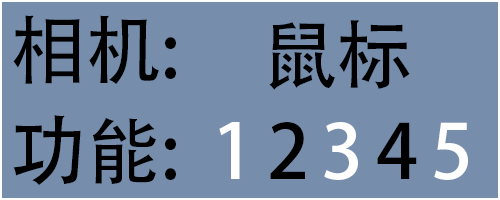
<style>
.page{position:relative;width:500px;height:200px;background:#768dac}
.page>*{position:absolute;margin:0}
.t1{font:75px "AdobeHeitiStd-Regular";color:#000000}
.t2{font:75px "AdobeHeitiStd-Regular";color:#ffffff}
</style>
<div class="page">
<p class="t1" style="left:13px;top:15px;width:163px;height:69px">相机:</p>
<p class="t1" style="left:269px;top:20px;width:141px;height:70px">鼠标</p>
<p class="t1" style="left:13px;top:115px;width:163px;height:70px">功能:</p>
<p class="t2" style="left:219px;top:122px;width:249px;height:58px">1    3    5</p>
<p class="t1" style="left:270px;top:122px;width:147px;height:57px">2    4</p>
</div>
